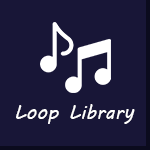
<style>
.page{position:relative;width:150px;height:150px;background:#181637}
.page>*{position:absolute;margin:0}
.t1{font:20.1px "MVBoli";color:#ffffff}
</style>
<div class="page">
<p class="t1" style="left:16px;top:104px;width:119px;height:20px">Loop Library</p>
</div>
